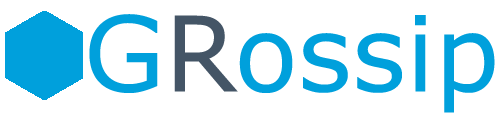
<style>
.page{position:relative;width:500px;height:120px;background:#ffffff}
.page>*{position:absolute;margin:0}
.t1{font:104.2px "Verdana";color:#00a0dc}
.t2{font:104.2px "Verdana";color:#445566}
</style>
<div class="page">
<p class="t1" style="left:89px;top:14px;width:406px;height:99px">G<span class="t2">R</span>ossip</p>
</div>
